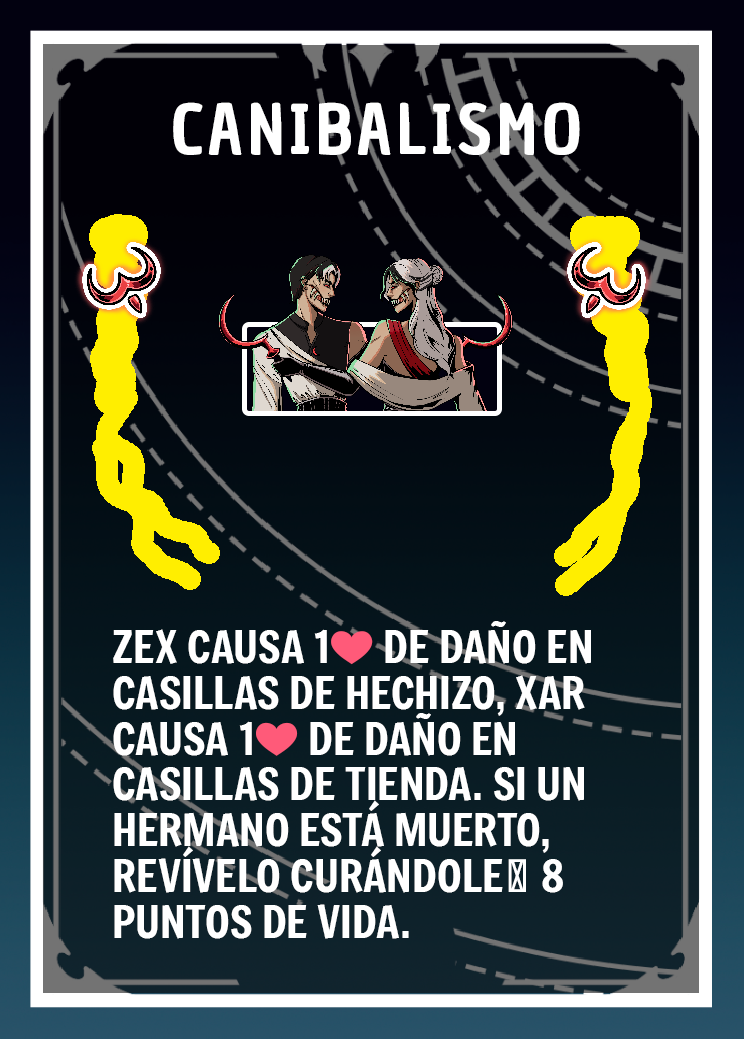
<style>
.page{position:relative;width:744px;height:1039px}
.page>*{position:absolute;margin:0}
.t1{font:66.7px "ChauPhilomeneOne-Regular";letter-spacing:0.075em;color:#ffffff}
.t2{font:43.7px/45.8px "Freeman-Regular";color:#ffffff}
.t3{font:43.7px/45.8px "EmojiOneColor";color:#ffffff}
</style>
<div class="page">
<p class="t1" style="left:173px;top:102px;width:407px;height:53px">CANIBALISMO</p>
<p class="t2" style="left:113px;top:621px;width:478px;height:318px">ZEX CAUSA 1<span class="t3">❤️</span> DE DAÑO EN CASILLAS DE HECHIZO, XAR CAUSA 1<span class="t3">❤️</span> DE DAÑO EN CASILLAS DE TIENDA. SI UN HERMANO ESTÁ MUERTO, REVÍVELO CURÁNDOLE🩸 8 PUNTOS DE VIDA.</p>
</div>
